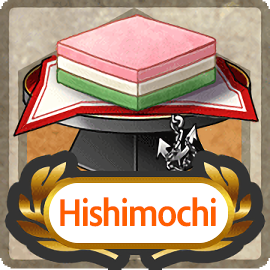
<style>
.page{position:relative;width:270px;height:270px}
.page>*{position:absolute;margin:0}
.t1{font:40px "AdobeClean-Bold";letter-spacing:-0.04em;color:#ff5d00;scale:0.9 1}
</style>
<div class="page">
<p class="t1" style="left:60px;top:197px;width:156px;height:30px">Hishimochi</p>
</div>
